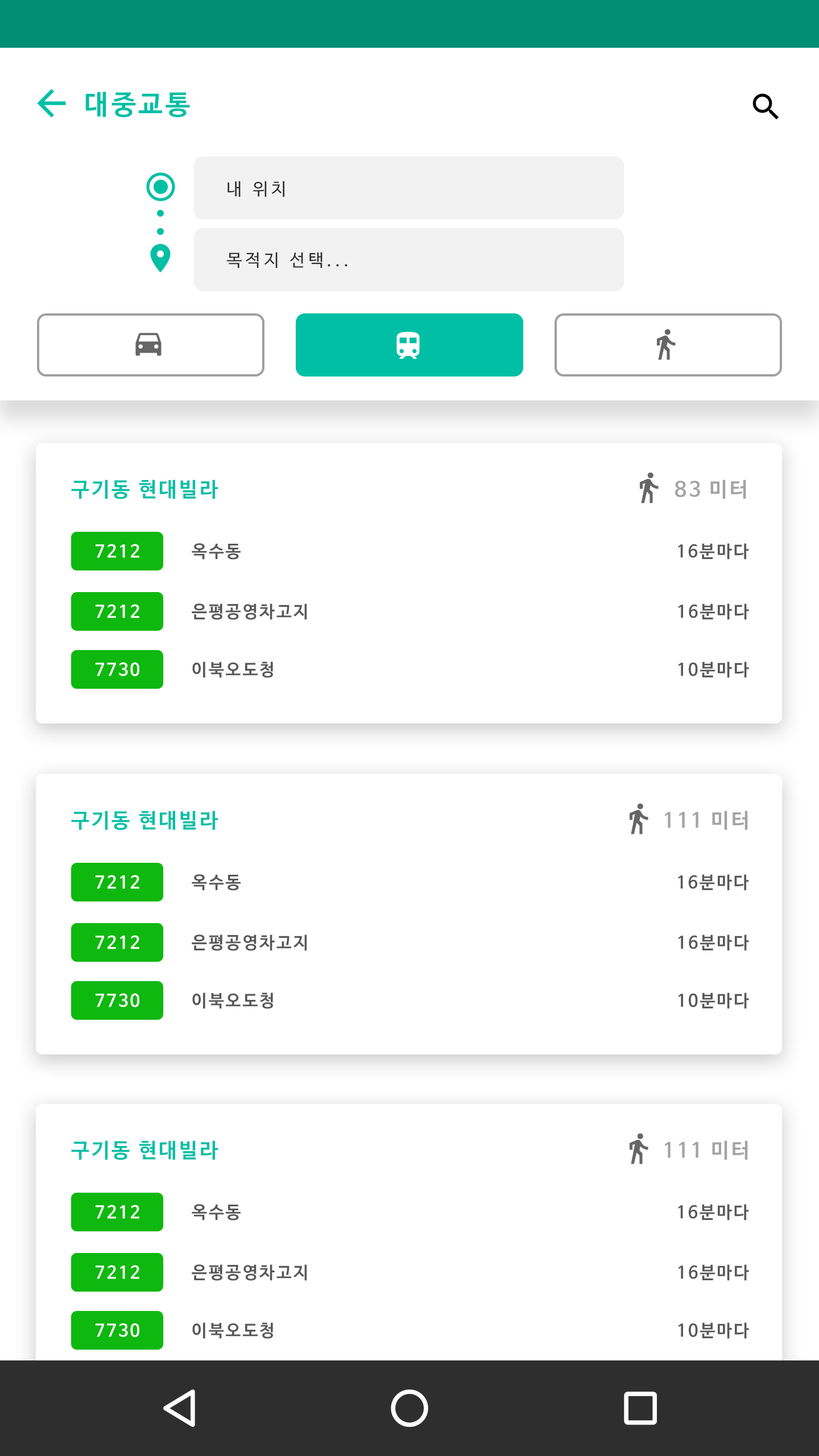
<style>
.page{position:relative;width:819px;height:1456px;background:#ffffff}
.page>*{position:absolute;margin:0}
.t1{font:27.3px "NanumBarunGothicBold";letter-spacing:0.1em;color:#00bfa5}
.t2{font:17.1px "NanumBarunGothic";letter-spacing:0.2em;color:#2e2e2e}
.t3{font:20.5px "NanumBarunGothicBold";letter-spacing:0.1em;color:#00bfa5}
.t4{font:20.5px "NanumBarunGothicBold";letter-spacing:0.1em;color:#a3a3a3}
.t5{font:17.1px "NanumBarunGothicBold";letter-spacing:0.1em;color:#ffffff}
.t6{font:17.1px "NanumBarunGothicBold";letter-spacing:0.1em;color:#585858}
</style>
<div class="page">
<p class="t1" style="left:85px;top:92px;width:105px;height:25px">대중교통</p>
<p class="t2" style="left:227px;top:181px;width:57px;height:16px">내 위치</p>
<p class="t2" style="left:226px;top:252px;width:122px;height:16px">목적지 선택...</p>
<p class="t3" style="left:71px;top:479px;width:147px;height:20px">구기동 현대빌라</p>
<p class="t4" style="left:675px;top:479px;width:71px;height:20px">83 미터</p>
<p class="t5" style="left:96px;top:544px;width:43px;height:14px">7212</p>
<p class="t6" style="left:192px;top:543px;width:49px;height:17px">옥수동</p>
<p class="t6" style="left:678px;top:543px;width:71px;height:17px">16분마다</p>
<p class="t5" style="left:96px;top:604px;width:43px;height:14px">7212</p>
<p class="t6" style="left:192px;top:603px;width:115px;height:17px">은평공영차고지</p>
<p class="t6" style="left:679px;top:603px;width:70px;height:17px">16분마다</p>
<p class="t5" style="left:96px;top:662px;width:43px;height:14px">7730</p>
<p class="t6" style="left:192px;top:661px;width:81px;height:17px">이북오도청</p>
<p class="t6" style="left:679px;top:661px;width:70px;height:17px">10분마다</p>
<p class="t3" style="left:71px;top:810px;width:147px;height:20px">구기동 현대빌라</p>
<p class="t4" style="left:665px;top:810px;width:83px;height:20px">111 미터</p>
<p class="t5" style="left:96px;top:875px;width:43px;height:14px">7212</p>
<p class="t6" style="left:192px;top:874px;width:49px;height:17px">옥수동</p>
<p class="t6" style="left:678px;top:874px;width:71px;height:17px">16분마다</p>
<p class="t5" style="left:96px;top:935px;width:43px;height:14px">7212</p>
<p class="t6" style="left:192px;top:934px;width:115px;height:17px">은평공영차고지</p>
<p class="t6" style="left:679px;top:934px;width:70px;height:17px">16분마다</p>
<p class="t5" style="left:96px;top:993px;width:43px;height:14px">7730</p>
<p class="t6" style="left:192px;top:992px;width:81px;height:17px">이북오도청</p>
<p class="t6" style="left:679px;top:992px;width:70px;height:17px">10분마다</p>
<p class="t3" style="left:71px;top:1140px;width:147px;height:20px">구기동 현대빌라</p>
<p class="t4" style="left:665px;top:1140px;width:83px;height:20px">111 미터</p>
<p class="t5" style="left:96px;top:1205px;width:43px;height:14px">7212</p>
<p class="t6" style="left:192px;top:1204px;width:49px;height:17px">옥수동</p>
<p class="t6" style="left:678px;top:1204px;width:71px;height:17px">16분마다</p>
<p class="t5" style="left:96px;top:1265px;width:43px;height:14px">7212</p>
<p class="t6" style="left:192px;top:1264px;width:115px;height:17px">은평공영차고지</p>
<p class="t6" style="left:679px;top:1264px;width:70px;height:17px">16분마다</p>
<p class="t5" style="left:96px;top:1323px;width:43px;height:14px">7730</p>
<p class="t6" style="left:192px;top:1322px;width:81px;height:17px">이북오도청</p>
<p class="t6" style="left:679px;top:1322px;width:70px;height:17px">10분마다</p>
</div>
